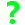
<style>
.page{position:relative;width:25px;height:25px;background:#ffffff}
.page>*{position:absolute;margin:0}
.t1{font:32.4px "Gadugi-Bold";color:#00ff18}
</style>
<div class="page">
<p class="t1" style="left:7px;top:1px;width:13px;height:23px">?</p>
</div>
